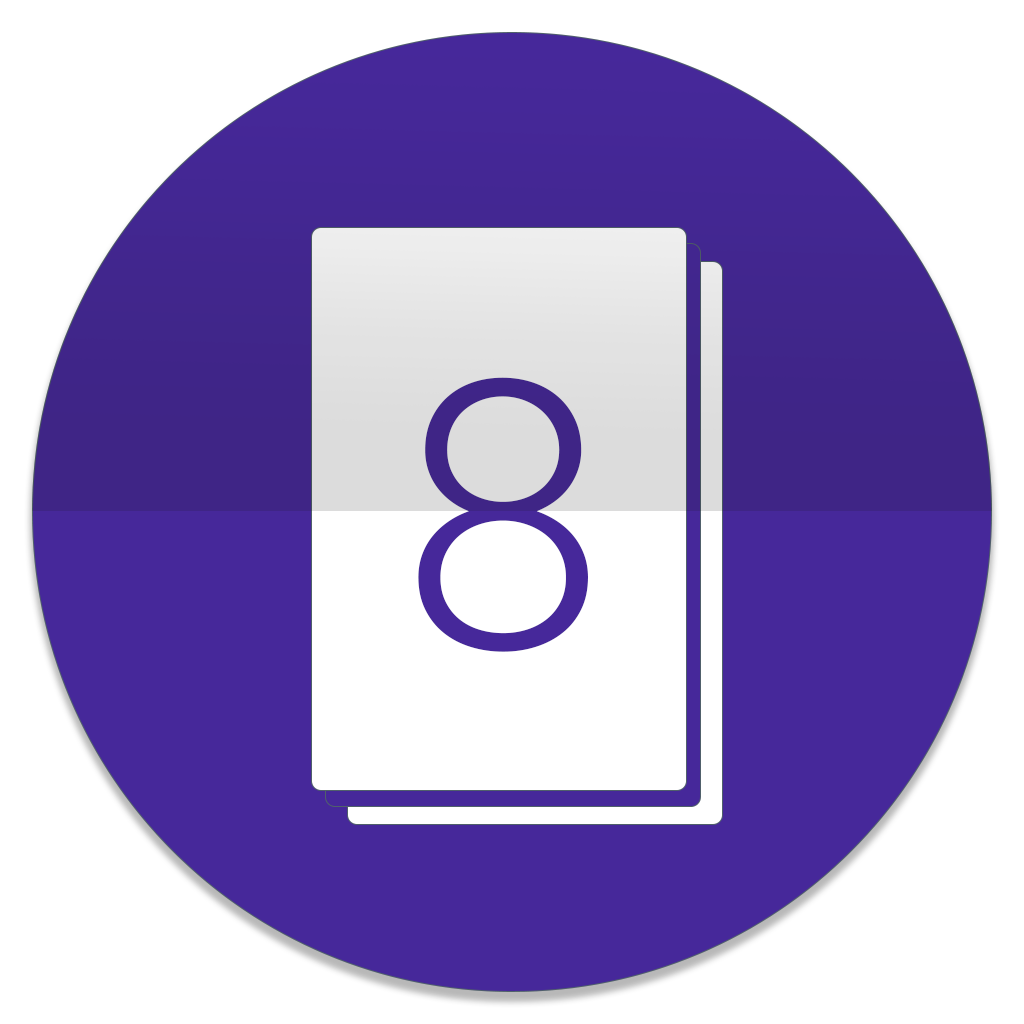
<style>
.page{position:relative;width:1024px;height:1024px;background:#ffffff}
.page>*{position:absolute;margin:0}
.t1{font:374.7px "RobotoMono-Light";color:#46289a}
</style>
<div class="page">
<p class="t1" style="left:418px;top:377px;width:170px;height:275px">8</p>
</div>
